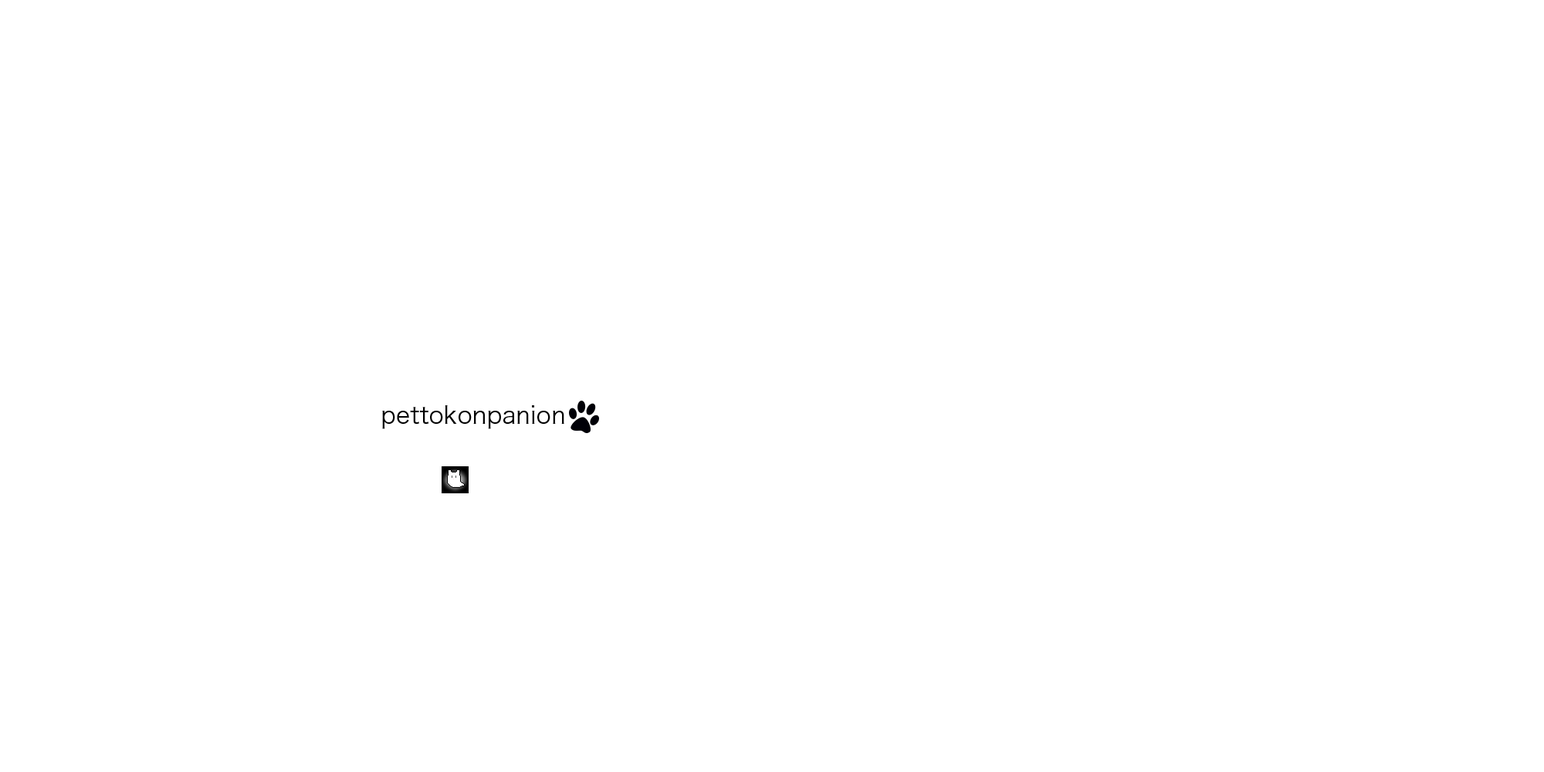
<style>
.page{position:relative;width:1544px;height:772px;background:#ffffff}
.page>*{position:absolute;margin:0}
.t1{font:24px "HiraKakuPro-W3";color:#000000}
</style>
<div class="page">
<p class="t1" style="left:382px;top:405px;width:182px;height:24px">pettokonpanion</p>
</div>
